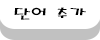
<style>
.page{position:relative;width:100px;height:40px;background:#ffffff}
.page>*{position:absolute;margin:0}
.t1{font:16px "MagicR-HM";color:#000000;scale:1.25 1}
</style>
<div class="page">
<p class="t1" style="left:14px;top:7px;width:72px;height:13px">단어 추가</p>
</div>
